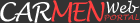
<style>
.page{position:relative;width:140px;height:23px;background:#333333}
.page>*{position:absolute;margin:0}
.t1{font:25.5px "LucidaHandwriting-Italic";letter-spacing:-0.08em;color:#ffffff}
.t2{font:25.5px "LucidaHandwriting-Italic";letter-spacing:-0.08em;color:#ff3f3f}
.t3{font:14.4px "LucidaHandwriting-Italic";color:#ffffff;scale:0.97 1}
.t4{font:7.4px "LucidaHandwriting-Italic";scale:1.09 1}
</style>
<div class="page">
<p class="t1" style="left:0px;top:0px;width:105px;height:23px">CAR<span class="t2">MEN</span></p>
<p class="t3" style="left:106px;top:0px;width:34px;height:14px">Web</p>
<p class="t4" style="left:104px;top:14px;width:36px;height:7px">PORTAL</p>
</div>
